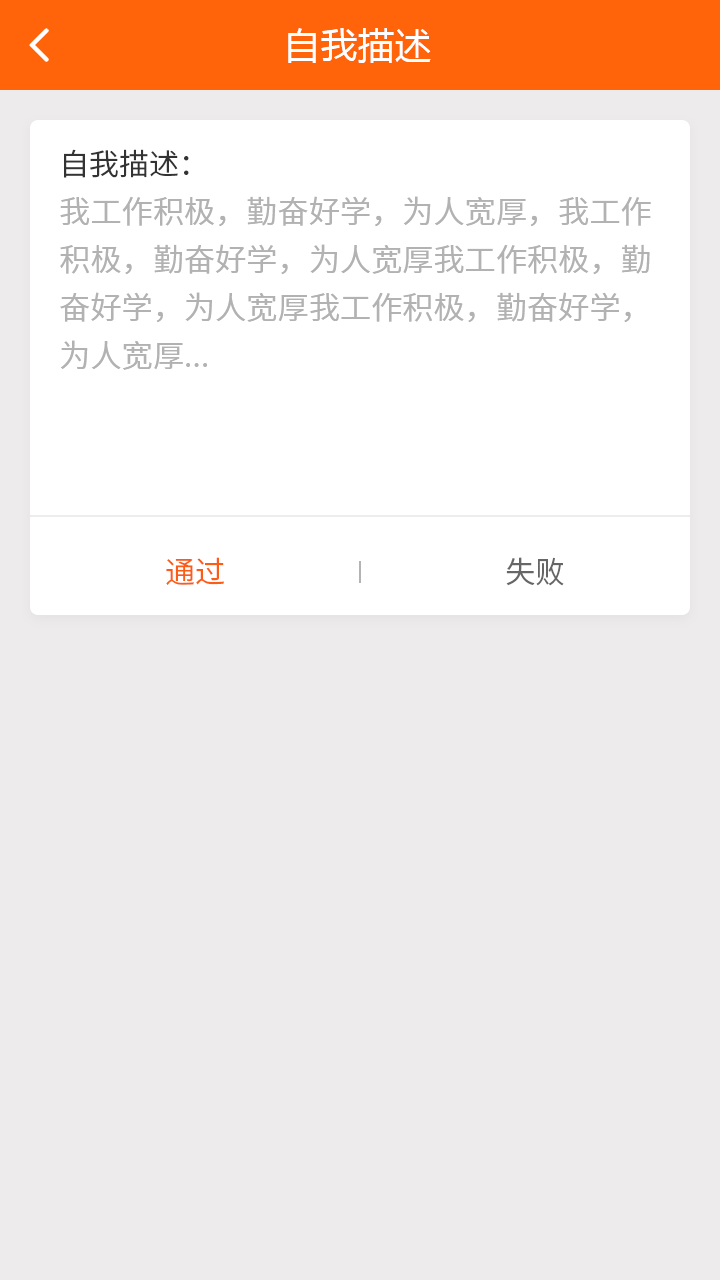
<style>
.page{position:relative;width:720px;height:1280px;background:#edebeb}
.page>*{position:absolute;margin:0}
.t1{font:36px "MicrosoftYaHei";letter-spacing:0.03em;color:#ffffff}
.t2{font:30px "NotoSansCJKsc-DemiLight";color:#333333}
.t3{font:31.2px/48px "NotoSansCJKsc-DemiLight";color:#b2b2b2}
.t4{font:30px "NotoSansCJKsc-DemiLight";color:#fb5d15}
.t5{font:30px "NotoSansCJKsc-DemiLight";color:#666666}
</style>
<div class="page">
<p class="t1" style="left:288px;top:28px;width:143px;height:35px">自我描述</p>
<p class="t2" style="left:64px;top:149px;width:125px;height:29px">自我描述：</p>
<p class="t3" style="left:60px;top:196px;width:591px;height:174px">我工作积极，勤奋好学，为人宽厚，我工作积极，勤奋好学，为人宽厚我工作积极，勤奋好学，为人宽厚我工作积极，勤奋好学，为人宽厚...</p>
<p class="t4" style="left:166px;top:557px;width:58px;height:28px">通过</p>
<p class="t5" style="left:506px;top:557px;width:58px;height:29px">失败</p>
</div>
